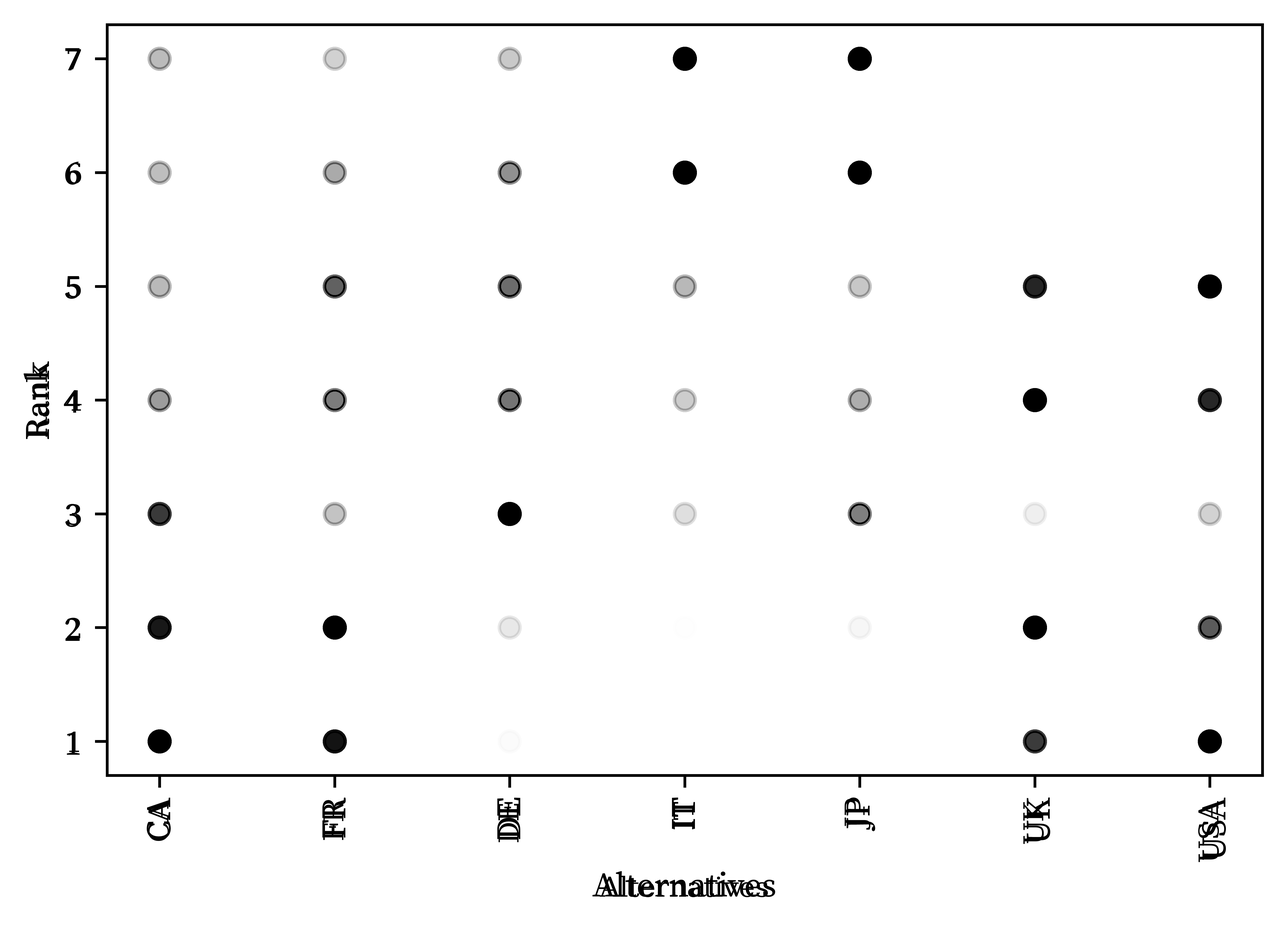
<style>
.page{position:relative;width:1287px;height:927px;background:#ffffff}
.page>*{position:absolute;margin:0}
.t1{font:34.3px "SourceSerifPro-Regular";color:#000000}
</style>
<div class="page">
<p class="t1" style="left:65px;top:48px;width:15px;height:22px">7</p>
<p class="t1" style="left:65px;top:161px;width:15px;height:24px">6</p>
<p class="t1" style="left:65px;top:276px;width:15px;height:23px">5</p>
<p class="t1" style="left:24px;top:361px;width:25px;height:78px;rotate:-90deg">Rank</p>
<p class="t1" style="left:64px;top:390px;width:16px;height:22px">4</p>
<p class="t1" style="left:65px;top:504px;width:15px;height:23px">3</p>
<p class="t1" style="left:65px;top:618px;width:15px;height:23px">2</p>
<p class="t1" style="left:67px;top:732px;width:13px;height:22px">1</p>
<p class="t1" style="left:147px;top:797px;width:24px;height:43px;rotate:-90deg">CA</p>
<p class="t1" style="left:322px;top:797px;width:24px;height:40px;rotate:-90deg">FR</p>
<p class="t1" style="left:497px;top:797px;width:24px;height:42px;rotate:-90deg">DE</p>
<p class="t1" style="left:672px;top:797px;width:23px;height:31px;rotate:-90deg">IT</p>
<p class="t1" style="left:847px;top:797px;width:28px;height:34px;rotate:-90deg">JP</p>
<p class="t1" style="left:1027px;top:797px;width:23px;height:46px;rotate:-90deg">UK</p>
<p class="t1" style="left:1202px;top:797px;width:24px;height:62px;rotate:-90deg">USA</p>
<p class="t1" style="left:592px;top:871px;width:183px;height:25px">Alternatives</p>
</div>
